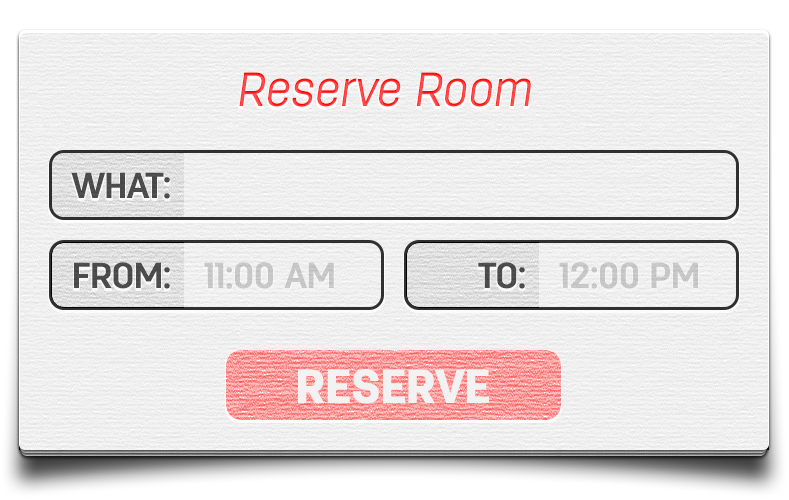
<style>
.page{position:relative;width:789px;height:500px;background:#f1f1f1}
.page>*{position:absolute;margin:0}
.t1{font:48px "Antartida-LightItalic";color:#ff3c3c}
.t2{font:36px "Antartida-Bold";color:#4d4d4d}
.t3{font:36px "Antartida-Bold";color:#c8c8c8}
.t4{font:48px "Antartida-Black";color:#f2f2f2}
</style>
<div class="page">
<p class="t1" style="left:239px;top:72px;width:292px;height:35px">Reserve Room</p>
<p class="t2" style="left:71px;top:172px;width:99px;height:27px">WHAT:</p>
<p class="t2" style="left:74px;top:262px;width:96px;height:27px">FROM:</p>
<p class="t3" style="left:204px;top:262px;width:130px;height:27px">11:00 AM</p>
<p class="t2" style="left:478px;top:262px;width:47px;height:27px">TO:</p>
<p class="t3" style="left:559px;top:262px;width:139px;height:27px">12:00 PM</p>
<p class="t4" style="left:298px;top:369px;width:191px;height:35px">RESERVE</p>
</div>
